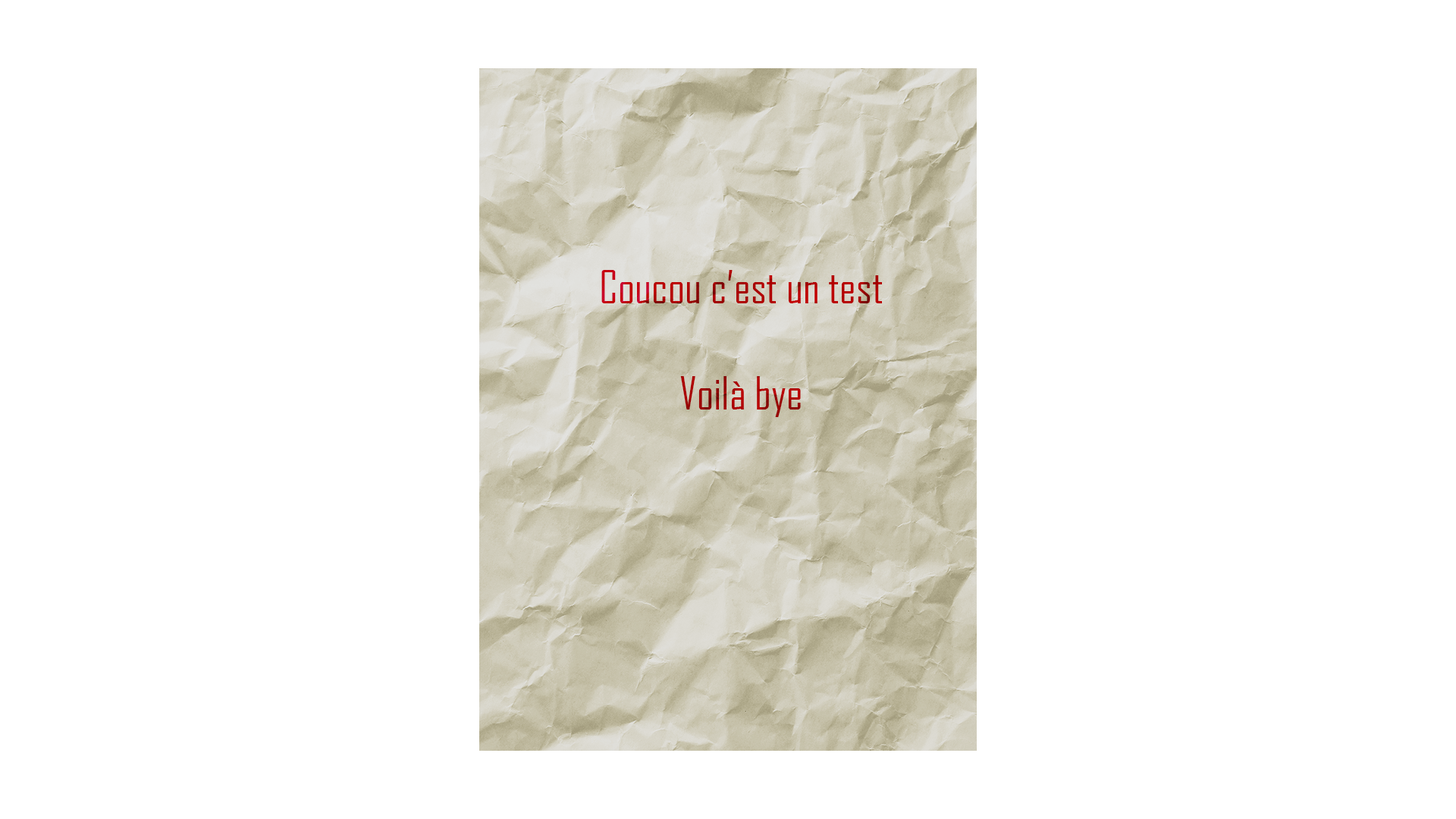
<style>
.page{position:relative;width:1456px;height:819px;background:#ffffff}
.page>*{position:absolute;margin:0}
.t1{font:44.2px "AgencyFB-Reg"}
</style>
<div class="page">
<p class="t1" style="left:601px;top:270px;width:281px;height:147px;text-align:center">Coucou c’est un test <br><br>Voilà bye</p>
</div>
